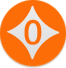
<style>
.page{position:relative;width:66px;height:68px;background:#fc6d08}
.page>*{position:absolute;margin:0}
.t1{font:30px "FZLTCHJW--GB1-0";color:#fc6d08}
</style>
<div class="page">
<p class="t1" style="left:24px;top:19px;width:18px;height:26px">0</p>
</div>
